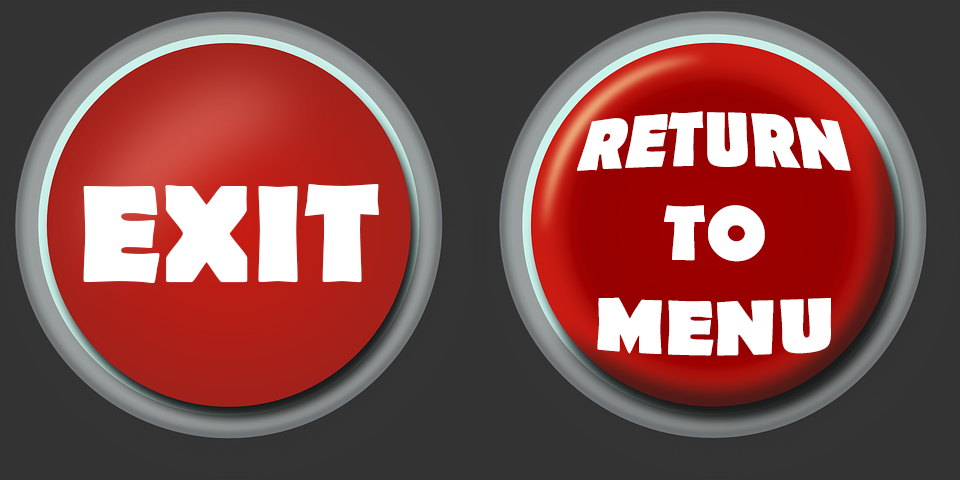
<style>
.page{position:relative;width:960px;height:480px;background:#333333}
.page>*{position:absolute;margin:0}
.t1{font:72px "BerlinSansFB-Bold";color:#ffffff}
.t2{font:140px "BerlinSansFB-Bold";color:#ffffff}
</style>
<div class="page">
<p class="t1" style="left:577px;top:111px;width:274px;height:245px;text-align:center">RETURN<br>TO<br>MENU</p>
<p class="t2" style="left:83px;top:184px;width:296px;height:99px">EXIT</p>
</div>
